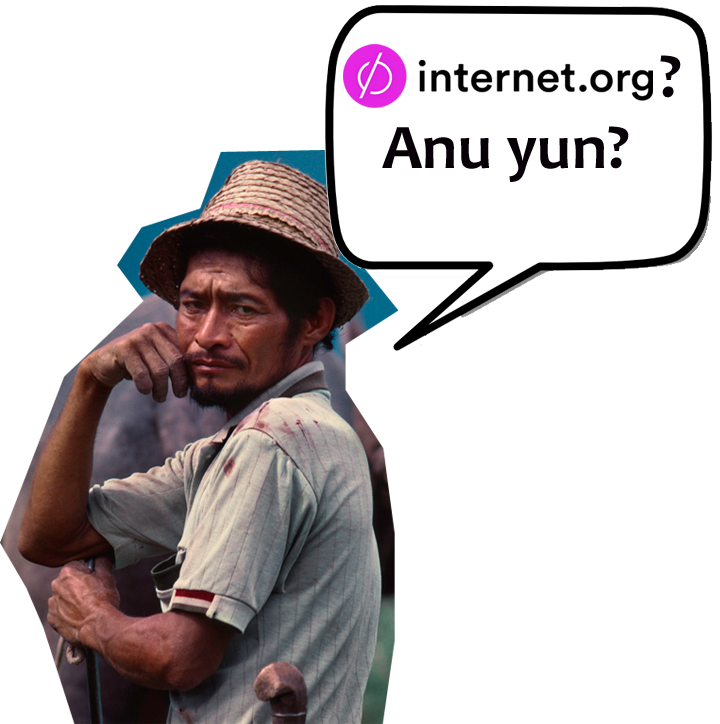
<style>
.page{position:relative;width:720px;height:724px;background:#ffffff}
.page>*{position:absolute;margin:0}
.t1{font:64px "Candara-Bold";color:#070107}
</style>
<div class="page">
<p class="t1" style="left:660px;top:55px;width:21px;height:43px">?</p>
<p class="t1" style="left:382px;top:126px;width:247px;height:56px">Anu yun?</p>
</div>
